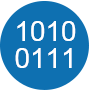
<style>
.page{position:relative;width:90px;height:90px;background:#0e70b1}
.page>*{position:absolute;margin:0}
.t1{font:28px "ArialSpecialG1";color:#ffffff}
</style>
<div class="page">
<p class="t1" style="left:17px;top:21px;width:59px;height:20px">1010</p>
<p class="t1" style="left:17px;top:21px;width:59px;height:20px;opacity:0.5">1010</p>
<p class="t1" style="left:15px;top:48px;width:57px;height:20px">0111</p>
<p class="t1" style="left:15px;top:48px;width:57px;height:20px;opacity:0.5">0111</p>
</div>
